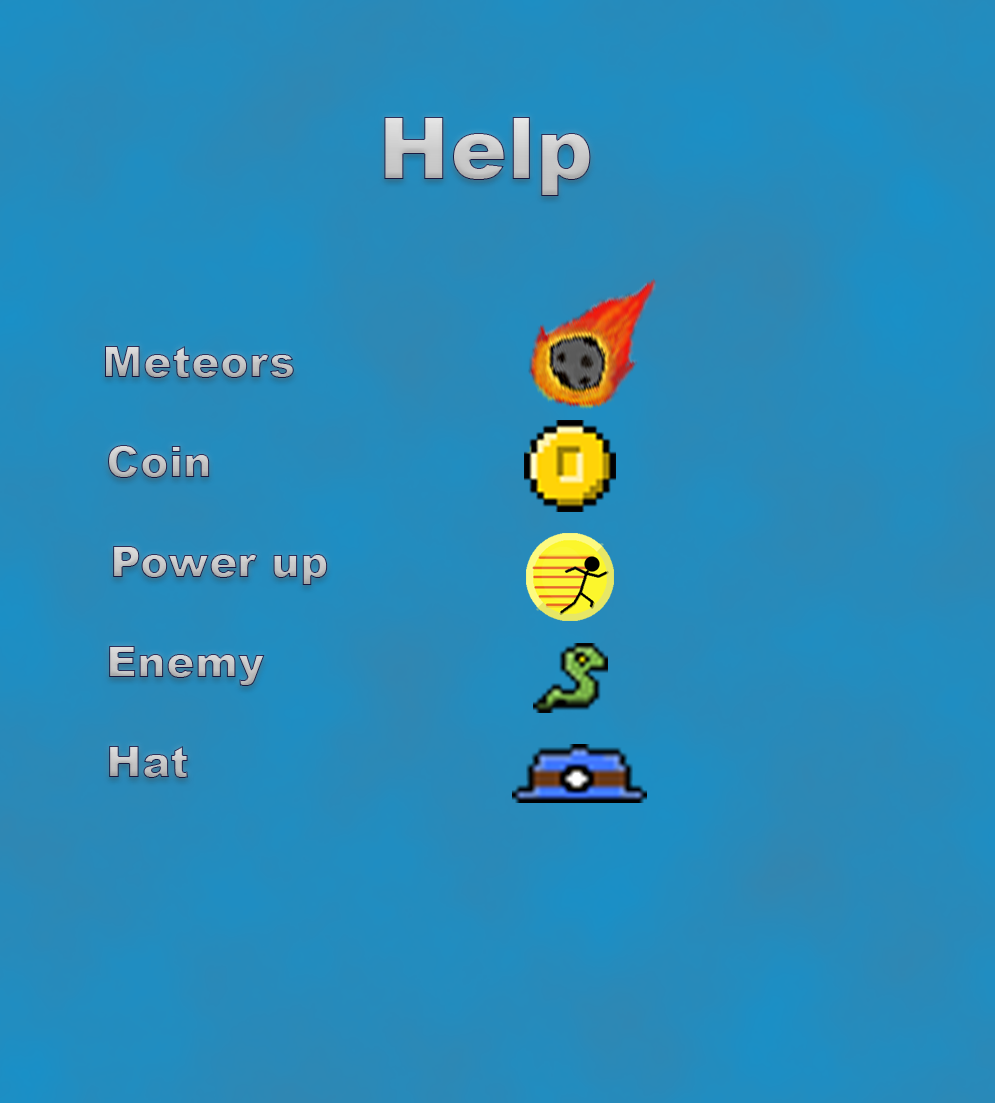
<style>
.page{position:relative;width:995px;height:1103px}
.page>*{position:absolute;margin:0}
.t1{font:85.9px "Arial-Black";color:#c8c8c8}
.t2{font:43.2px "Arial-Black"}
</style>
<div class="page">
<p class="t1" style="left:384px;top:117px;width:207px;height:79px">Help</p>
<p class="t2" style="left:105px;top:346px;width:189px;height:32px">Meteors</p>
<p class="t2" style="left:108px;top:445px;width:102px;height:33px">Coin</p>
<p class="t2" style="left:113px;top:546px;width:215px;height:39px">Power up</p>
<p class="t2" style="left:109px;top:646px;width:156px;height:40px">Enemy</p>
<p class="t2" style="left:109px;top:746px;width:79px;height:32px">Hat</p>
</div>
